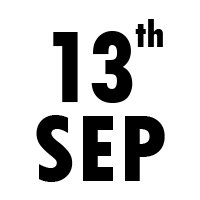
<style>
.page{position:relative;width:200px;height:200px;background:#ffffff}
.page>*{position:absolute;margin:0}
.t1{font:39.7px "TwCenMT-CondensedExtraBold";color:#000000}
.t2{font:108.3px "TwCenMT-CondensedExtraBold";color:#000000}
.t3{font:100px "TwCenMT-CondensedExtraBold";color:#000000}
</style>
<div class="page">
<p class="t1" style="left:135px;top:19px;width:28px;height:28px">th</p>
<p class="t2" style="left:53px;top:31px;width:80px;height:72px">13</p>
<p class="t3" style="left:36px;top:115px;width:129px;height:67px">SEP</p>
</div>
